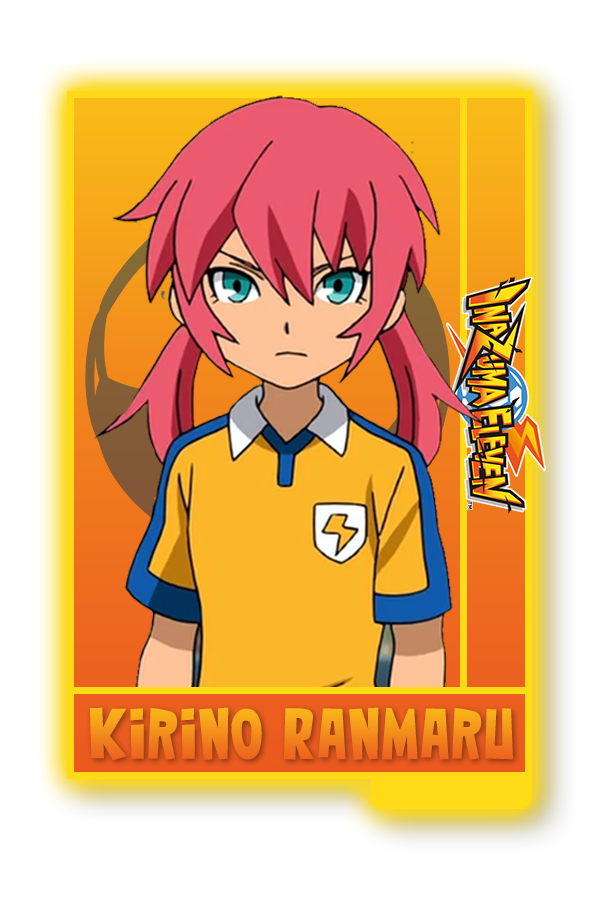
<style>
.page{position:relative;width:600px;height:900px;background:#ffffff}
.page>*{position:absolute;margin:0}
.t1{font:75px "TTG-Bold"}
</style>
<div class="page">
<p class="t1" style="left:89px;top:707px;width:424px;height:54px">Kirino Ranmaru</p>
</div>
